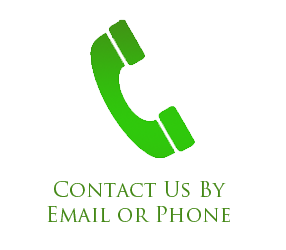
<style>
.page{position:relative;width:286px;height:250px;background:#ffffff}
.page>*{position:absolute;margin:0}
.t1{font:20.8px "TrajanPro-Regular";color:#448816}
</style>
<div class="page">
<p class="t1" style="left:47px;top:181px;width:183px;height:41px;text-align:center">Contact Us By<br>Email or Phone</p>
</div>
